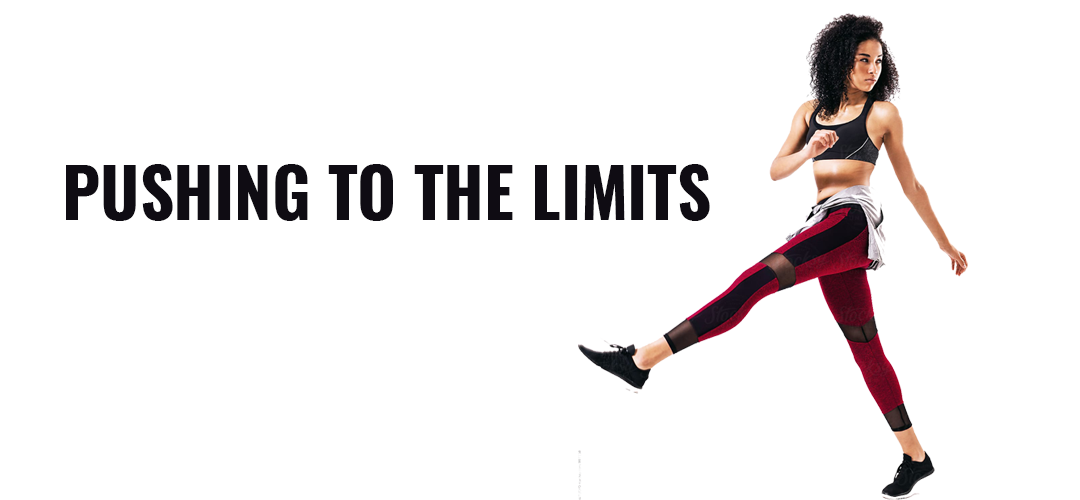
<style>
.page{position:relative;width:1080px;height:500px;background:#ffffff}
.page>*{position:absolute;margin:0}
.t1{font:67px "Oswald-Bold";color:#0f0c13}
</style>
<div class="page">
<p class="t1" style="left:66px;top:164px;width:644px;height:57px">PUSHING TO THE LIMITS</p>
</div>
